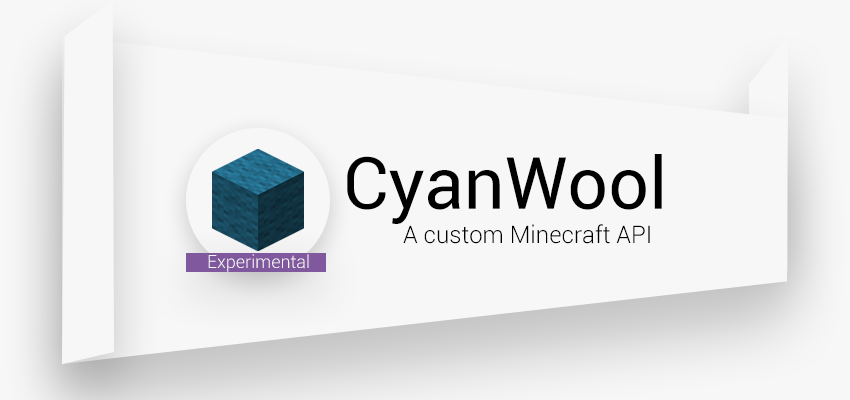
<style>
.page{position:relative;width:850px;height:400px;background:#f7f7f7}
.page>*{position:absolute;margin:0}
.t1{font:72px "Roboto-Regular";color:#000000}
.t2{font:24px "Roboto-Light";color:#000000}
.t3{font:18px "Roboto-Light";color:#f8f8f8}
</style>
<div class="page">
<p class="t1" style="left:347px;top:154px;width:315px;height:70px">CyanWool</p>
<p class="t2" style="left:403px;top:224px;width:247px;height:20px">A custom Minecraft API</p>
<p class="t3" style="left:208px;top:254px;width:101px;height:18px">Experimental</p>
</div>
